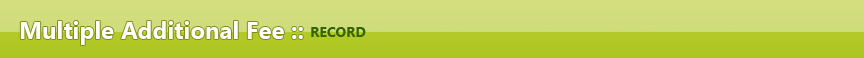
<style>
.page{position:relative;width:864px;height:58px}
.page>*{position:absolute;margin:0}
.t1{font:24px "SegoeUI-Bold";color:#fefefe}
.t2{font:14px "SegoeUI-Bold";color:#336600}
</style>
<div class="page">
<p class="t1" style="left:20px;top:21px;width:283px;height:24px">Multiple Additional Fee ::</p>
<p class="t2" style="left:311px;top:27px;width:55px;height:10px">RECORD</p>
</div>
